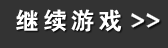
<style>
.page{position:relative;width:168px;height:48px;background:#333333}
.page>*{position:absolute;margin:0}
.t1{font:24px "Jdahei";letter-spacing:0.15em;color:#ffffff}
</style>
<div class="page">
<p class="t1" style="left:16px;top:9px;width:106px;height:23px">继续游戏</p>
</div>
